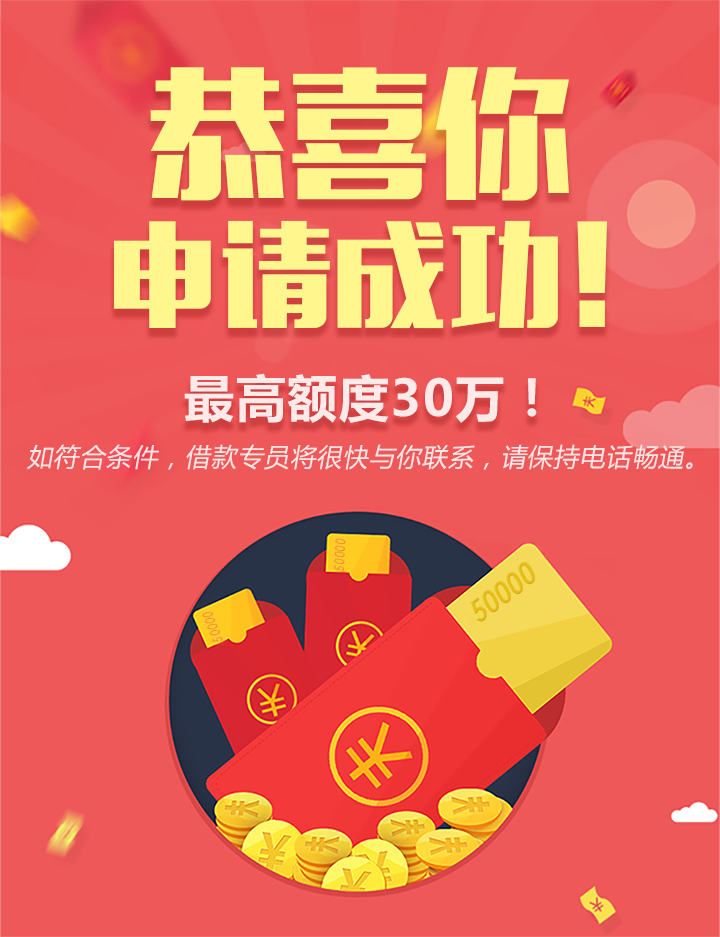
<style>
.page{position:relative;width:720px;height:937px;background:#ee5859}
.page>*{position:absolute;margin:0}
.t1{font:140.4px "MFLiHei_Noncommercial-Regular";letter-spacing:0.013em;color:#fff68d}
.t2{font:112.5px "MFLiHei_Noncommercial-Regular";letter-spacing:0.013em;color:#fff68d}
.t3{font:49.9px "MicrosoftYaHei-Bold";letter-spacing:0.033em;color:#ffeaea}
.t4{font:25.5px "MicrosoftYaHei";letter-spacing:0.033em;color:#ffe6e6;font-style:italic}
.t5{font:14px "CenturyGothic-Bold";letter-spacing:0.033em;color:#f9a12b;font-style:italic;scale:0.81 1}
.t6{font:31.6px "CenturyGothic-Bold";letter-spacing:0.033em;color:#e6bf16;font-style:italic;scale:0.81 1}
</style>
<div class="page">
<p class="t1" style="left:150px;top:67px;width:419px;height:134px">恭喜你</p>
<p class="t2" style="left:114px;top:220px;width:493px;height:109px">申请成功！</p>
<p class="t3" style="left:184px;top:373px;width:353px;height:50px">最高额度30万！</p>
<p class="t4" style="left:27px;top:444px;width:666px;height:26px">如符合条件，借款专员将很快与你联系，请保持电话畅通。</p>
<p class="t5" style="left:333px;top:537px;width:13px;height:35px;rotate:-88deg">50000</p>
<p class="t6" style="left:470px;top:561px;width:65px;height:61px;rotate:-38deg">50000</p>
<p class="t5" style="left:202px;top:611px;width:21px;height:31px;rotate:-112deg">50000</p>
</div>
